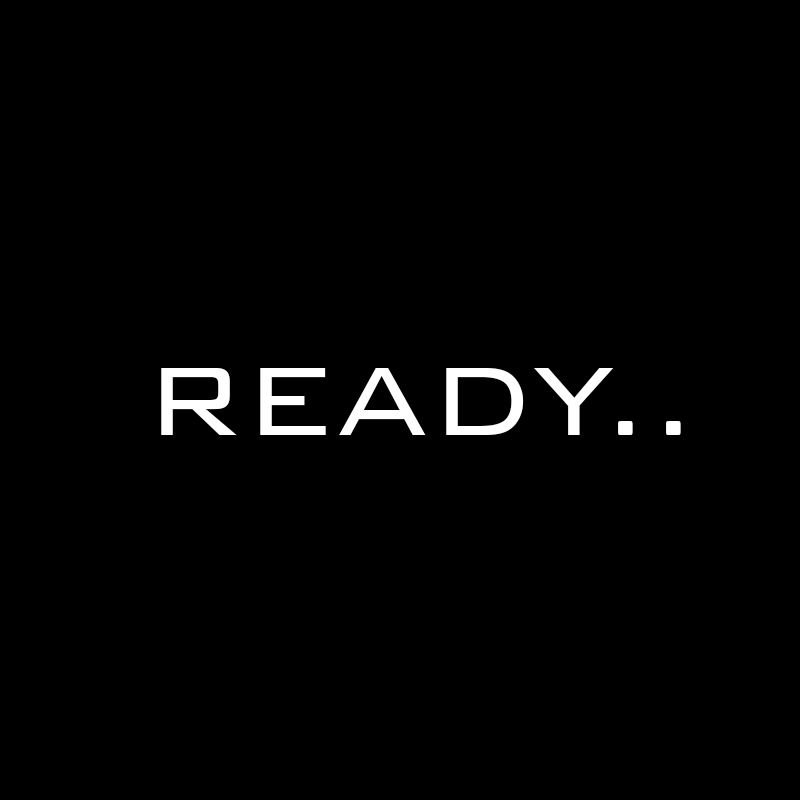
<style>
.page{position:relative;width:800px;height:800px;background:#000000}
.page>*{position:absolute;margin:0}
.t1{font:130px "BankGothicBT-Light";color:#ffffff}
</style>
<div class="page">
<p class="t1" style="left:161px;top:368px;width:520px;height:67px">READY..</p>
</div>
